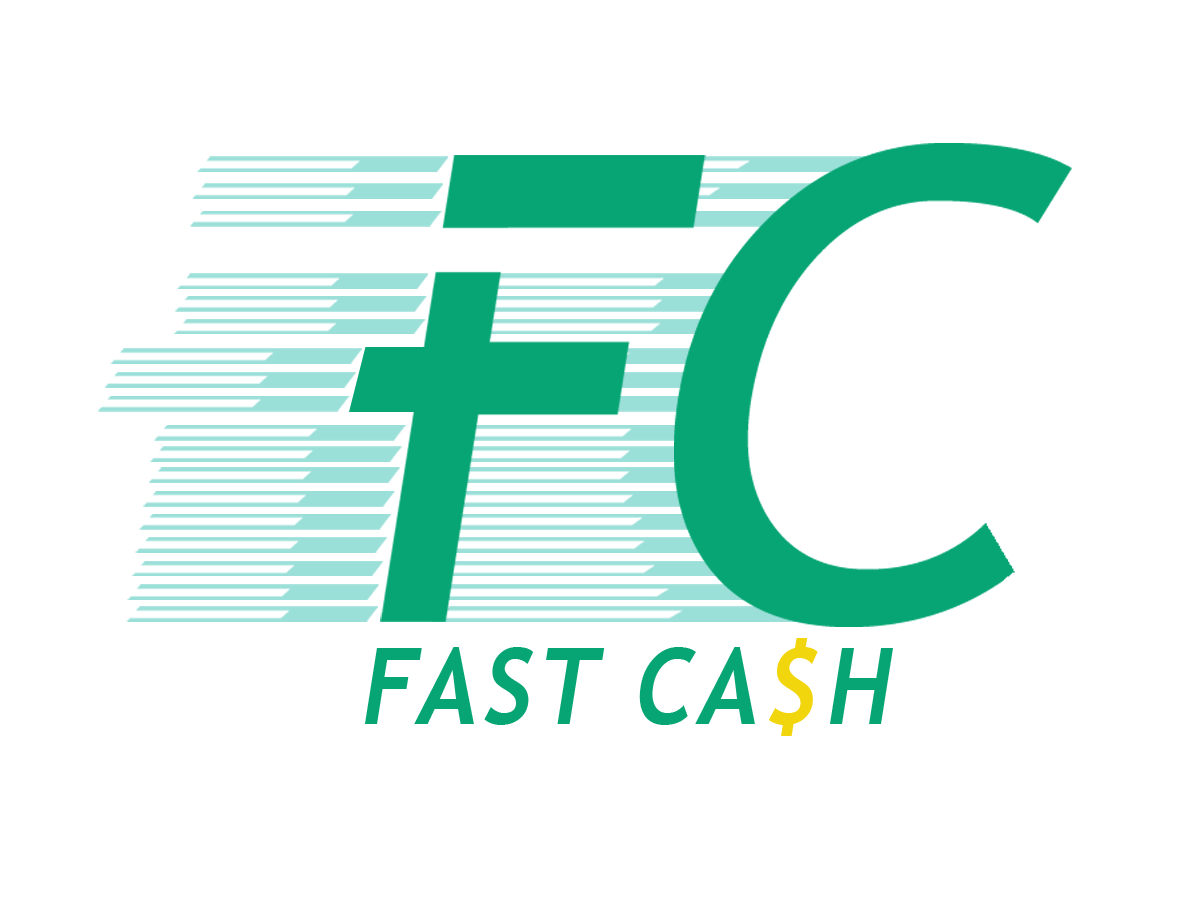
<style>
.page{position:relative;width:1200px;height:900px;background:#ffffff}
.page>*{position:absolute;margin:0}
.t1{font:106.2px "TrebuchetMS-Bold";letter-spacing:0.06em;color:#07a574;font-style:italic;scale:0.9 1}
.t2{font:106.2px "TrebuchetMS-Bold";letter-spacing:0.06em;color:#f1d60d;font-style:italic;scale:0.9 1}
</style>
<div class="page">
<p class="t1" style="left:365px;top:638px;width:528px;height:98px">FAST CA<span class="t2">$</span>H</p>
</div>
